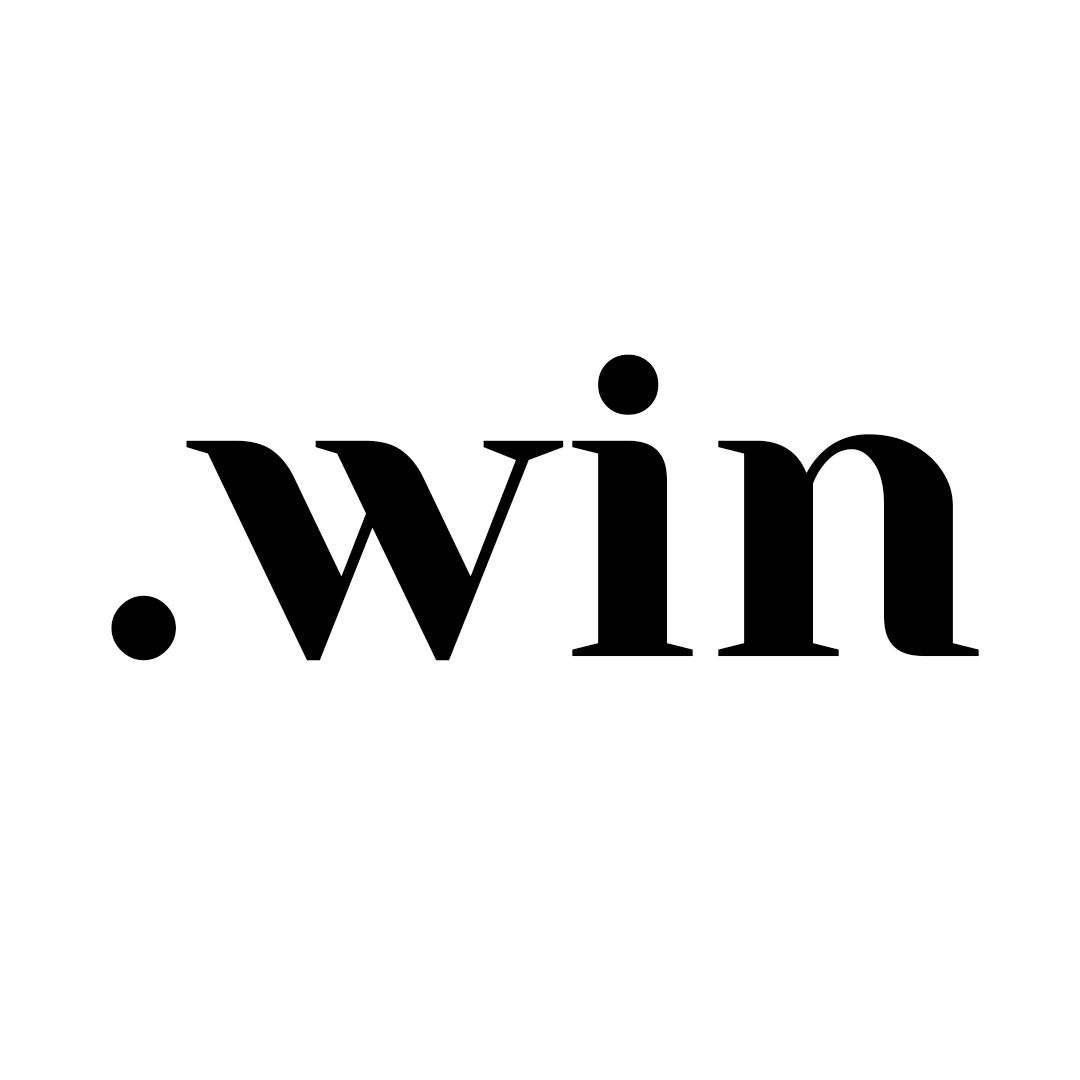
<style>
.page{position:relative;width:1080px;height:1080px;background:#ffffff}
.page>*{position:absolute;margin:0}
.t1{font:430.6px "YesevaOne-Regular";color:#000000}
</style>
<div class="page">
<p class="t1" style="left:111px;top:354px;width:868px;height:307px">.win</p>
</div>
